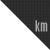
<style>
.page{position:relative;width:50px;height:50px;background:#ffffff}
.page>*{position:absolute;margin:0}
.t1{font:13.8px "PlacardMT-Condensed";color:#a8a7a7}
.t2{font:20px "PlacardMT-Condensed";color:#1993fb}
</style>
<div class="page">
<p class="t1" style="left:35px;top:20px;width:13px;height:12px"><span class="t2"><br></span>km</p>
</div>
